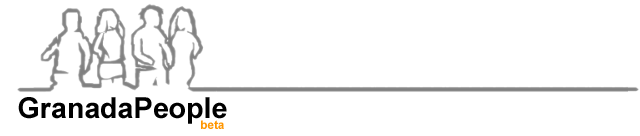
<style>
.page{position:relative;width:640px;height:136px;background:#ffffff}
.page>*{position:absolute;margin:0}
.t1{font:28.6px "Arial-BoldMT";color:#000000}
.t2{font:11.9px "Arial-BoldMT";color:#ff9600}
</style>
<div class="page">
<p class="t1" style="left:18px;top:97px;width:209px;height:27px">GranadaPeople</p>
<p class="t2" style="left:201px;top:120px;width:23px;height:9px">beta</p>
</div>
